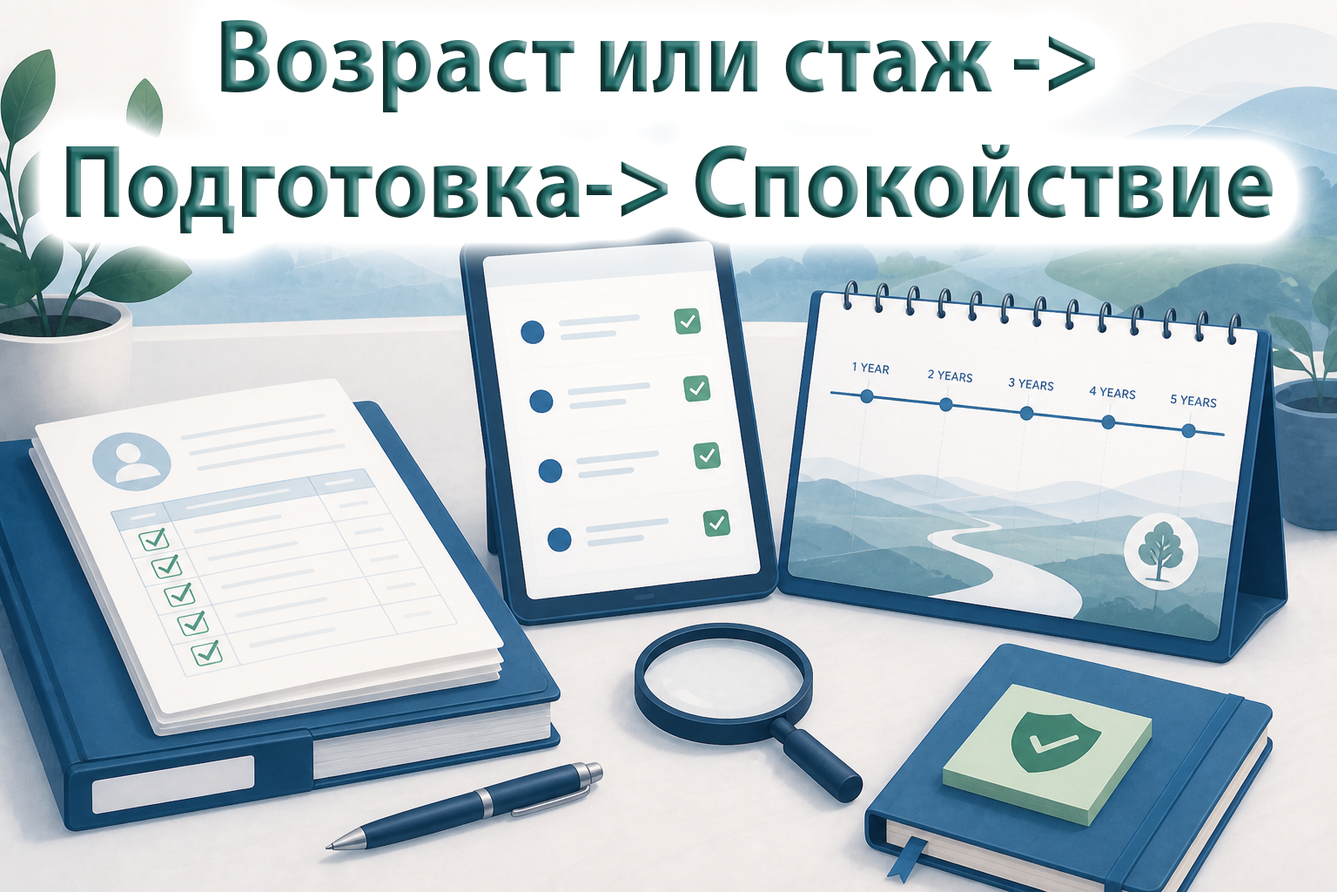
<style>
.page{position:relative;width:1337px;height:892px}
.page>*{position:absolute;margin:0}
.t1{font:104.5px "MyriadPro-Bold";scale:0.92 1}
</style>
<div class="page">
<p class="t1" style="left:66px;top:20px;width:1207px;height:213px;text-align:center">Возраст или стаж -&gt; <br>Подготовка-&gt; Спокойствие</p>
</div>
